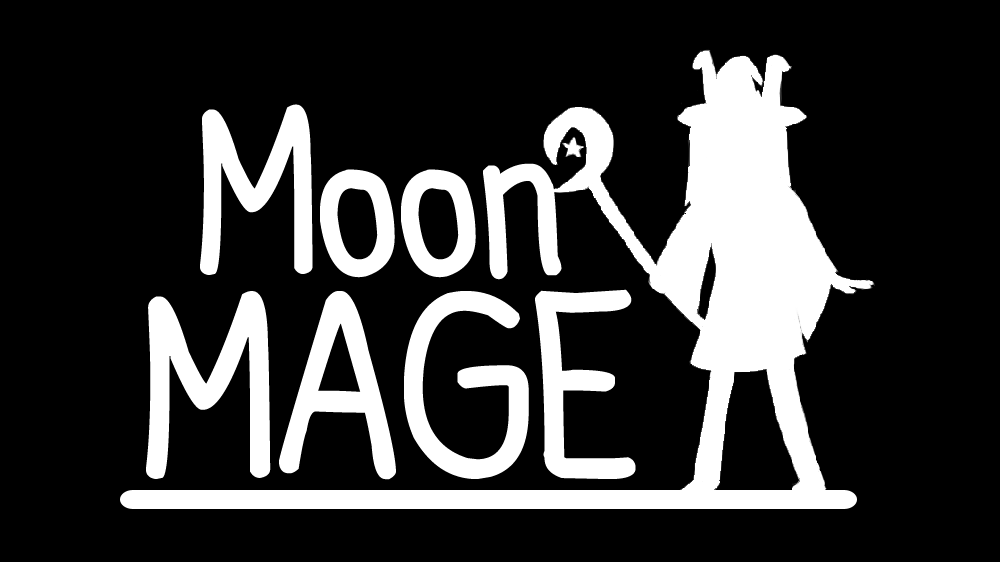
<style>
.page{position:relative;width:1000px;height:562px;background:#000000}
.page>*{position:absolute;margin:0}
.t1{font:242.8px "Cartoonero";color:#ffffff}
.t2{font:268.5px "Cartoonero";color:#ffffff}
</style>
<div class="page">
<p class="t1" style="left:200px;top:104px;width:362px;height:176px">Moon</p>
<p class="t2" style="left:146px;top:289px;width:490px;height:191px">MAGE</p>
</div>
